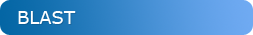
<style>
.page{position:relative;width:253px;height:35px}
.page>*{position:absolute;margin:0}
.t1{font:18px "Verdana";color:#ffffff}
</style>
<div class="page">
<p class="t1" style="left:18px;top:11px;width:58px;height:13px">BLAST</p>
</div>
